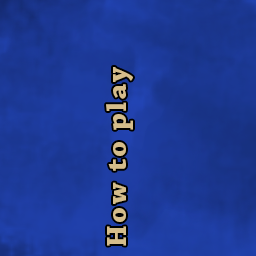
<style>
.page{position:relative;width:256px;height:256px}
.page>*{position:absolute;margin:0}
.t1{font:29.3px "ChaparralPro-Bold";letter-spacing:0.08em;color:#d5bd8b}
</style>
<div class="page">
<p class="t1" style="left:106px;top:67px;width:27px;height:179px;rotate:-90deg">How to play</p>
</div>
